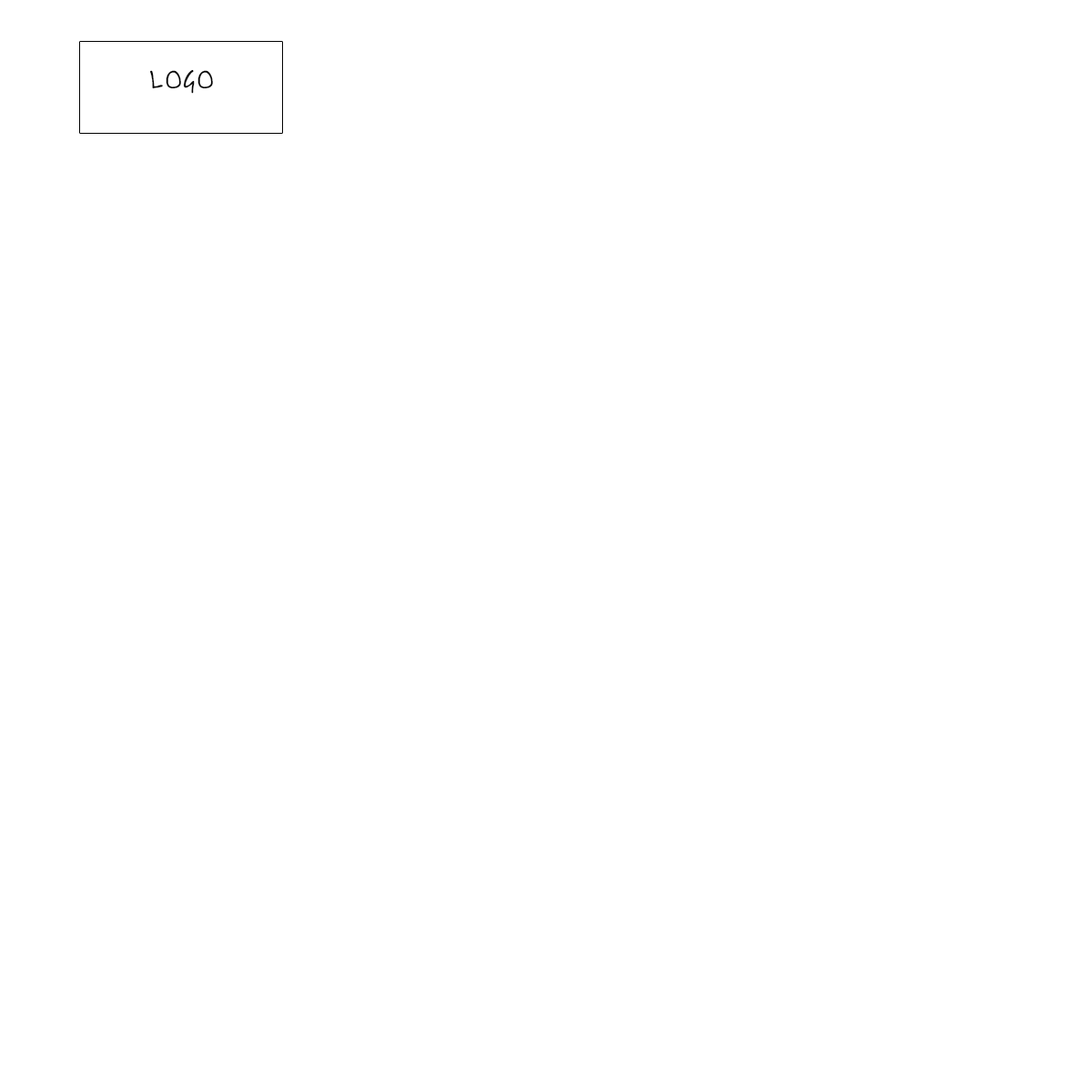
<style>
.page{position:relative;width:1092px;height:1092px;background:#ffffff}
.page>*{position:absolute;margin:0}
.t1{font:23.3px "ASafePlacetoFall";letter-spacing:0.1em;color:#040404}
</style>
<div class="page">
<p class="t1" style="left:150px;top:69px;width:63px;height:25px">LOGO</p>
</div>
